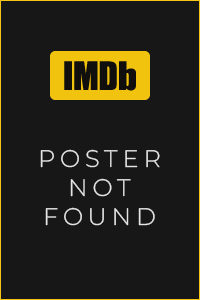
<style>
.page{position:relative;width:200px;height:300px;background:#171717}
.page>*{position:absolute;margin:0}
.t1{font:24px "Montserrat-Light";letter-spacing:0.2em;color:#e5e5e5}
</style>
<div class="page">
<p class="t1" style="left:40px;top:149px;width:120px;height:77px;text-align:center">POSTER<br>NOT<br>FOUND</p>
</div>
